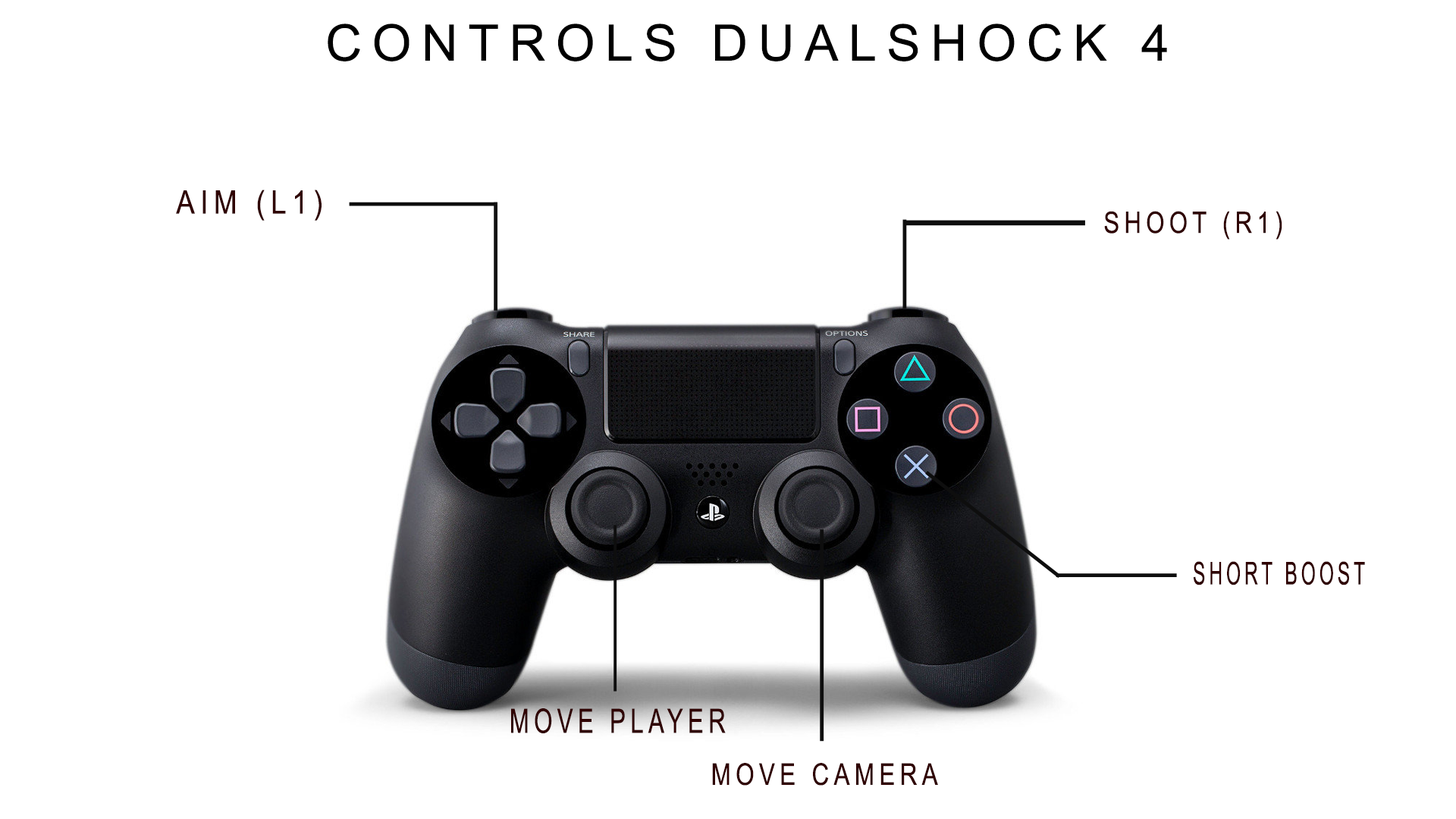
<style>
.page{position:relative;width:1456px;height:819px;background:#ffffff}
.page>*{position:absolute;margin:0}
.t1{font:50.6px "ArialMT";letter-spacing:0.2em;color:#000000}
.t2{font:32.4px "ArialMT";letter-spacing:0.2em;color:#2f0000;scale:0.86 1}
.t3{font:29.6px "ArialMT";letter-spacing:0.2em;color:#2f0000;scale:0.8 1}
.t4{font:31.4px "ArialMT";letter-spacing:0.2em;color:#2f0000;scale:0.59 1}
.t5{font:33.6px "ArialMT";letter-spacing:0.2em;color:#2f0000;scale:0.71 1}
.t6{font:30px "ArialMT";letter-spacing:0.2em;color:#2f0000;scale:0.8 1}
</style>
<div class="page">
<p class="t1" style="left:328px;top:24px;width:839px;height:37px">CONTROLS DUALSHOCK 4</p>
<p class="t2" style="left:176px;top:190px;width:146px;height:31px">AIM (L1)</p>
<p class="t3" style="left:1104px;top:211px;width:178px;height:29px">SHOOT (R1)</p>
<p class="t4" style="left:1194px;top:561px;width:171px;height:24px">SHORT BOOST</p>
<p class="t5" style="left:511px;top:708px;width:215px;height:25px">MOVE PLAYER</p>
<p class="t6" style="left:712px;top:763px;width:226px;height:23px">MOVE CAMERA</p>
</div>
